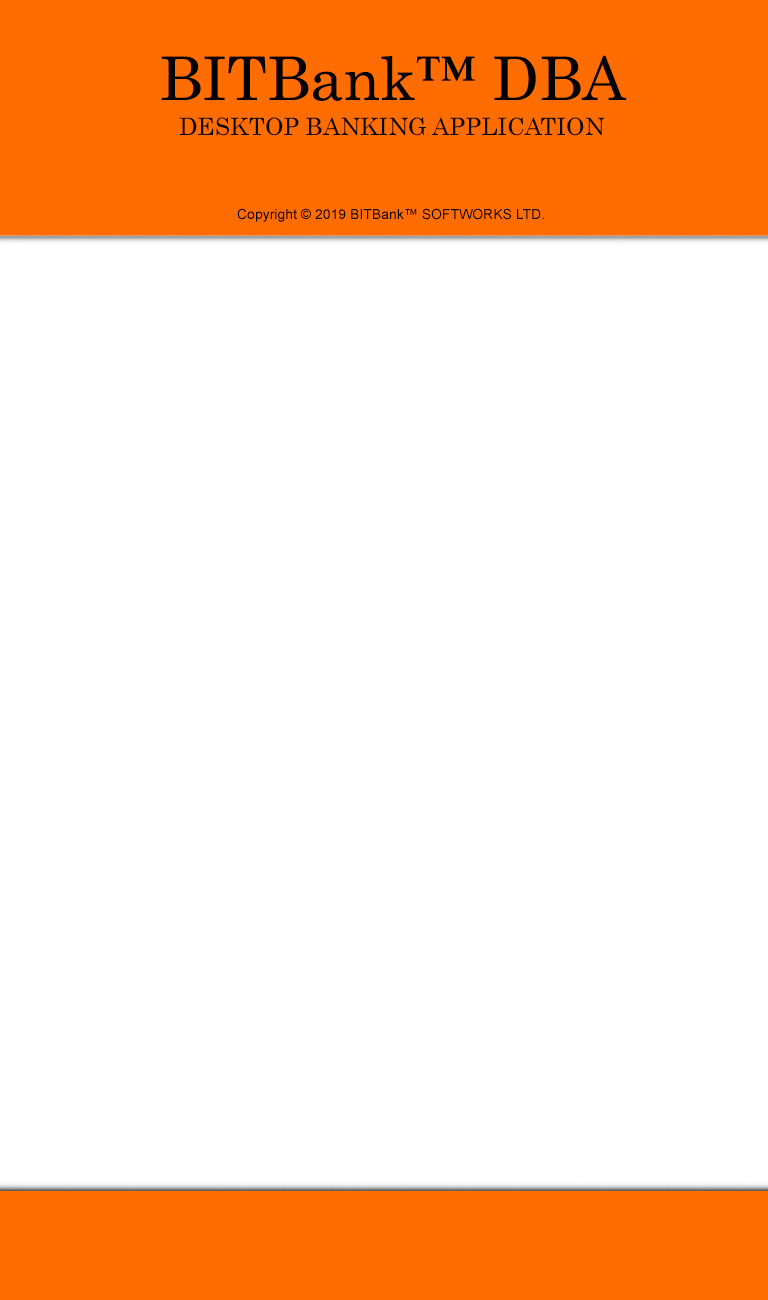
<style>
.page{position:relative;width:768px;height:1300px;background:#ffffff}
.page>*{position:absolute;margin:0}
.t1{font:60px "Century";color:#000000}
.t2{font:24px "Century";color:#000000}
.t3{font:14px "ArialMT";color:#000000}
</style>
<div class="page">
<p class="t1" style="left:161px;top:55px;width:466px;height:46px">BITBank™ DBA</p>
<p class="t2" style="left:179px;top:117px;width:426px;height:19px">DESKTOP BANKING APPLICATION</p>
<p class="t3" style="left:237px;top:208px;width:307px;height:14px">Copyright © 2019 BITBank™ SOFTWORKS LTD.</p>
</div>
